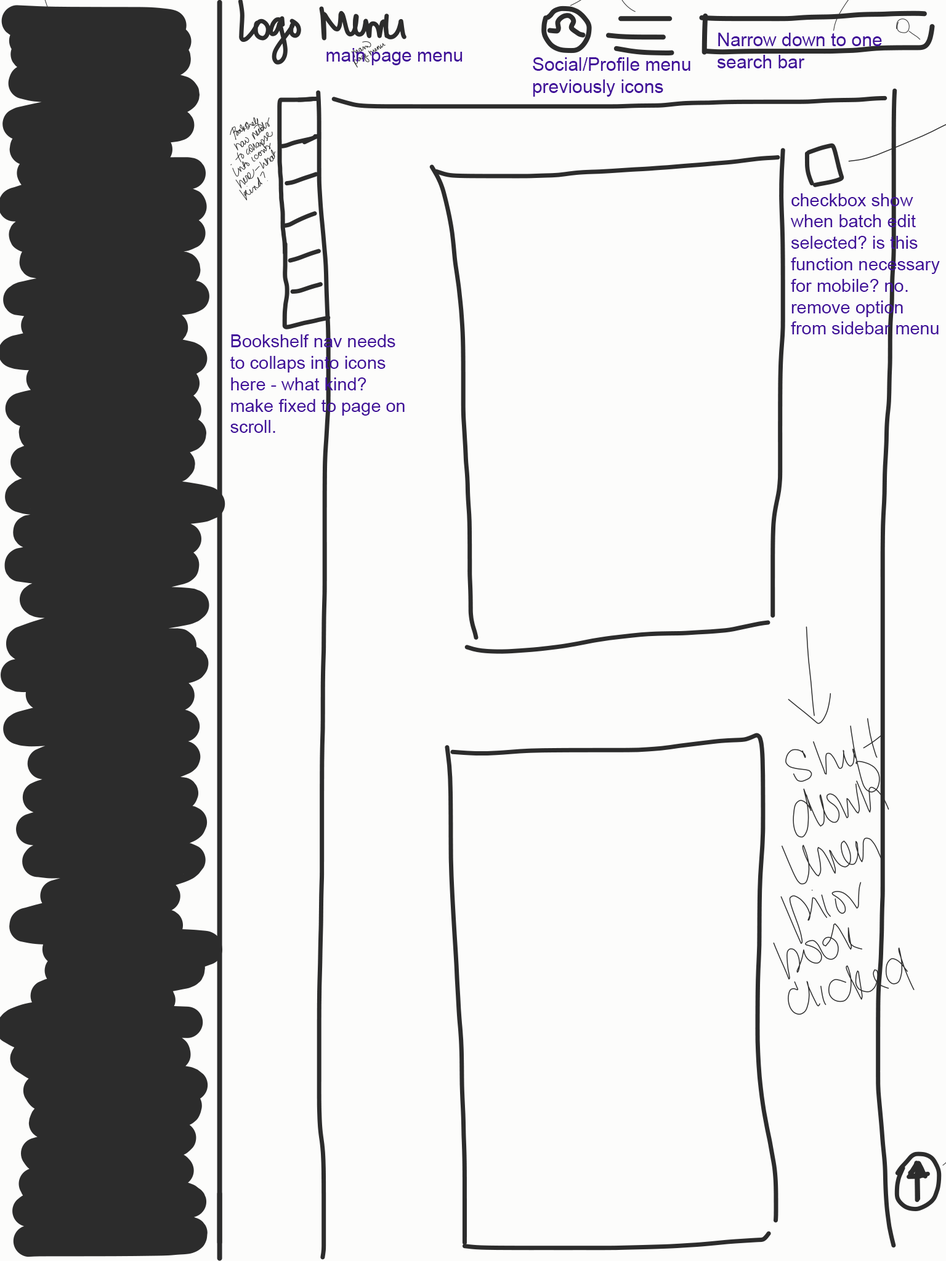
<style>
.page{position:relative;width:946px;height:1261px;background:#fcfcfb}
.page>*{position:absolute;margin:0}
.t1{font:18.5px "ArialMT";color:#411299}
.t2{font:17.9px "ArialMT";color:#411299}
</style>
<div class="page">
<p class="t1" style="left:717px;top:33px;width:165px;height:35px">Narrow down to one <br>search bar</p>
<p class="t1" style="left:326px;top:48px;width:136px;height:17px">main page menu</p>
<p class="t1" style="left:533px;top:57px;width:157px;height:40px">Social/Profile menu<br>previously icons</p>
<p class="t2" style="left:791px;top:193px;width:149px;height:141px">checkbox show<br>when batch edit<br>selected? is this <br>function necessary<br>for mobile? no.<br>remove option <br>from sidebar menu</p>
<p class="t2" style="left:230px;top:334px;width:175px;height:99px">Bookshelf nav needs<br>to collaps into icons<br>here - what kind?<br>make fixed to page on<br>scroll.</p>
</div>
